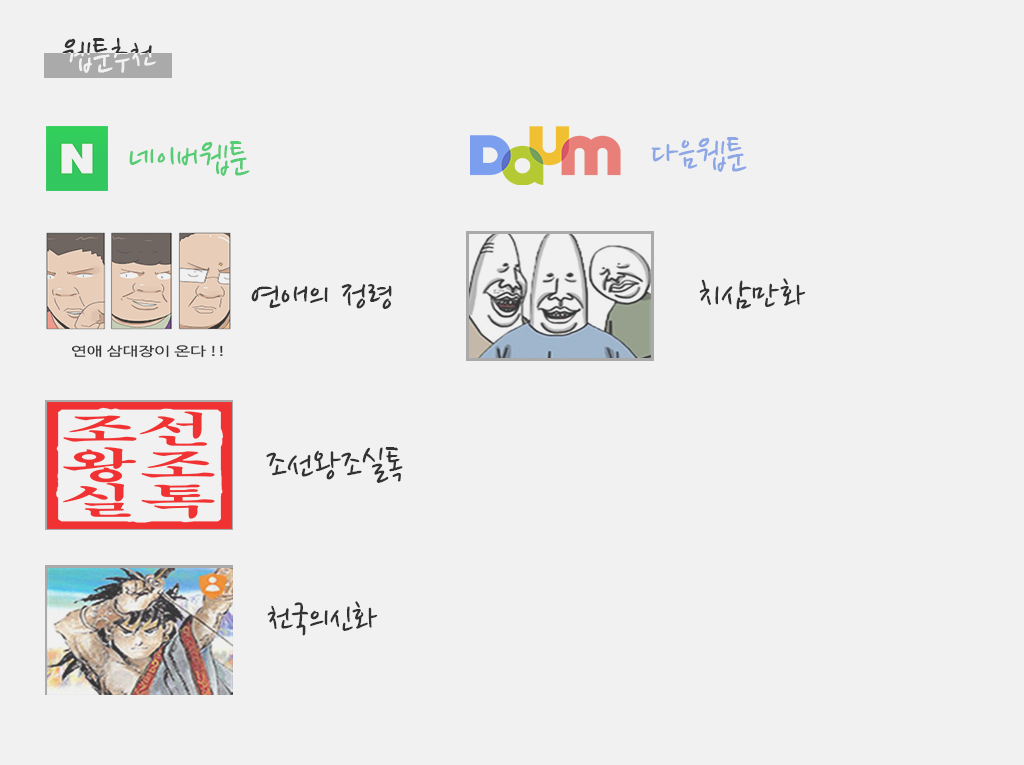
<style>
.page{position:relative;width:1024px;height:765px;background:#f1f1f1}
.page>*{position:absolute;margin:0}
.t1{font:40px "NanumPen";color:#799cf0}
.t2{font:40px "NanumPen";color:#56cd75}
.t3{font:40px "NanumPen";color:#323232}
</style>
<div class="page">
<p class="t1" style="left:651px;top:137px;width:96px;height:35px">다음웹툰</p>
<p class="t2" style="left:129px;top:141px;width:121px;height:35px">네이버웹툰</p>
<p class="t3" style="left:699px;top:278px;width:107px;height:32px">치삼만화</p>
<p class="t3" style="left:251px;top:284px;width:141px;height:25px">연애의 정령</p>
<p class="t3" style="left:266px;top:447px;width:137px;height:36px">조선왕조실톡</p>
<p class="t3" style="left:267px;top:601px;width:111px;height:35px">천국의신화</p>
</div>
